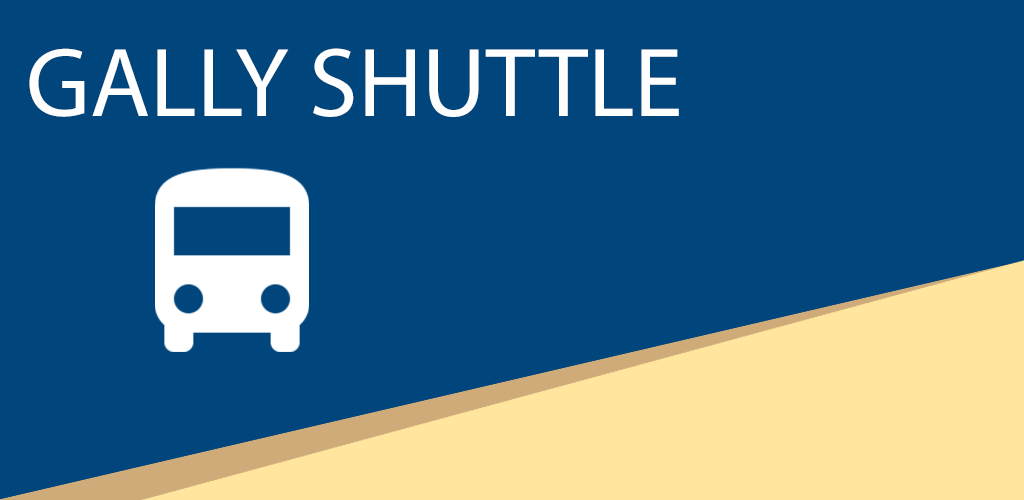
<style>
.page{position:relative;width:1024px;height:500px;background:#00457c}
.page>*{position:absolute;margin:0}
.t1{font:98.6px "MyriadPro-Regular";color:#ffffff}
</style>
<div class="page">
<p class="t1" style="left:29px;top:48px;width:650px;height:69px">GALLY SHUTTLE</p>
</div>
